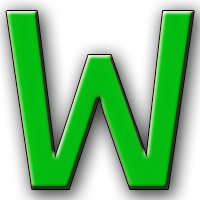
<style>
.page{position:relative;width:200px;height:200px}
.page>*{position:absolute;margin:0}
.t1{font:364px "Consolas";color:#04bf10}
</style>
<div class="page">
<p class="t1" style="left:6px;top:11px;width:188px;height:178px">w</p>
</div>
